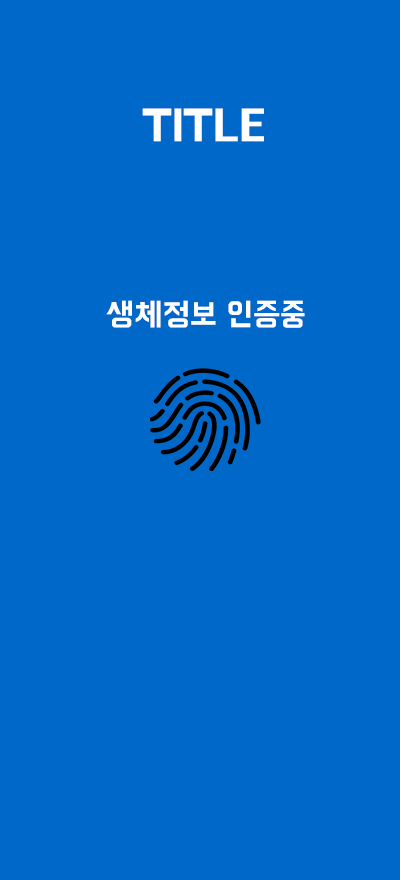
<style>
.page{position:relative;width:400px;height:880px;background:#0068c8}
.page>*{position:absolute;margin:0}
.t1{font:45px "BMHANNAPro";color:#ffffff}
.t2{font:32px "BMHANNAPro";color:#ffffff}
</style>
<div class="page">
<p class="t1" style="left:142px;top:108px;width:122px;height:34px">TITLE</p>
<p class="t2" style="left:106px;top:300px;width:199px;height:28px">생체정보 인증중</p>
</div>
